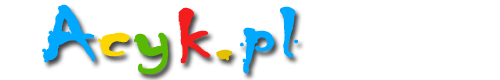
<style>
.page{position:relative;width:500px;height:80px;background:#ffffff}
.page>*{position:absolute;margin:0}
.t1{font:72px "Chiller-Regular";color:#00a8ff;font-weight:bold;scale:1.5 1}
.t2{font:72px "Chiller-Regular";color:#fdd600;font-weight:bold;scale:1.5 1}
.t3{font:72px "Chiller-Regular";color:#59b804;font-weight:bold;scale:1.5 1}
.t4{font:72px "Chiller-Regular";color:#f41d1d;font-weight:bold;scale:1.5 1}
.t5{font:72px "Chiller-Regular";color:#e3c000;font-weight:bold;scale:1.5 1}
</style>
<div class="page">
<p class="t1" style="left:42px;top:4px;width:257px;height:71px">A<span class="t2">c</span><span class="t3">y</span><span class="t4">k</span><span class="t5">.</span>pl</p>
</div>
